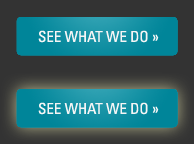
<style>
.page{position:relative;width:194px;height:144px;background:#333333}
.page>*{position:absolute;margin:0}
.t1{font:15px "Univers-Condensed";color:#f5f5f5;text-transform:uppercase}
</style>
<div class="page">
<p class="t1" style="left:38px;top:30px;width:121px;height:13px">See what we do »</p>
<p class="t1" style="left:38px;top:102px;width:121px;height:13px">See what we do »</p>
</div>
